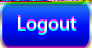
<style>
.page{position:relative;width:92px;height:48px}
.page>*{position:absolute;margin:0}
.t1{font:20.5px "MyriadPro-Semibold";scale:0.95 1}
</style>
<div class="page">
<p class="t1" style="left:18px;top:15px;width:59px;height:18px">Logout</p>
</div>
